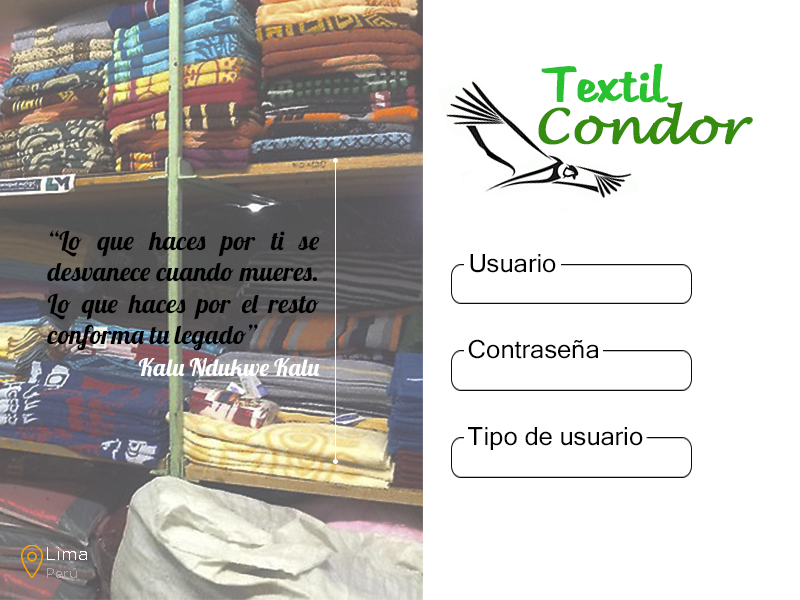
<style>
.page{position:relative;width:800px;height:600px;background:#ffffff}
.page>*{position:absolute;margin:0}
.t1{font:48px "Martina";color:#28c12f;font-weight:bold}
.t2{font:48px "LucidaHandwriting-Italic";color:#358c0e;font-weight:bold}
.t3{font:26px "Lobster-Regular";color:#000000}
.t4{font:25px "MicrosoftSansSerif";color:#000000}
.t5{font:24px "Lobster-Regular";color:#fefeff}
.t6{font:18px "GothamBook";color:#ffffff}
.t7{font:14px "GothamBook";color:#aaa9a9}
</style>
<div class="page">
<p class="t1" style="left:541px;top:63px;width:128px;height:40px">Textil</p>
<p class="t2" style="left:538px;top:102px;width:215px;height:43px">Condor</p>
<p class="t3" style="left:47px;top:230px;width:273px;height:121px;text-align:justify">“Lo que haces por ti se desvanece cuando mueres. Lo que haces por el resto conforma tu legado”</p>
<p class="t4" style="left:470px;top:254px;width:86px;height:19px">Usuario</p>
<p class="t4" style="left:468px;top:339px;width:130px;height:20px">Contraseña</p>
<p class="t5" style="left:138px;top:358px;width:182px;height:19px">Kalu Ndukwe Kalu</p>
<p class="t4" style="left:468px;top:427px;width:175px;height:23px">Tipo de usuario</p>
<p class="t6" style="left:47px;top:547px;width:40px;height:13px">Lima</p>
<p class="t7" style="left:47px;top:568px;width:30px;height:10px">Perú</p>
</div>
